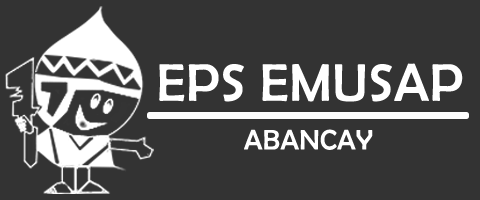
<style>
.page{position:relative;width:480px;height:200px;background:#333333}
.page>*{position:absolute;margin:0}
.t1{font:53.2px "BerlinSansFB-Reg";letter-spacing:0.015em;color:#ffffff}
.t2{font:28.1px "BerlinSansFB-Reg";letter-spacing:0.015em;color:#ffffff}
</style>
<div class="page">
<p class="t1" style="left:159px;top:63px;width:304px;height:39px">EPS EMUSAP</p>
<p class="t2" style="left:244px;top:129px;width:129px;height:21px">ABANCAY</p>
</div>
